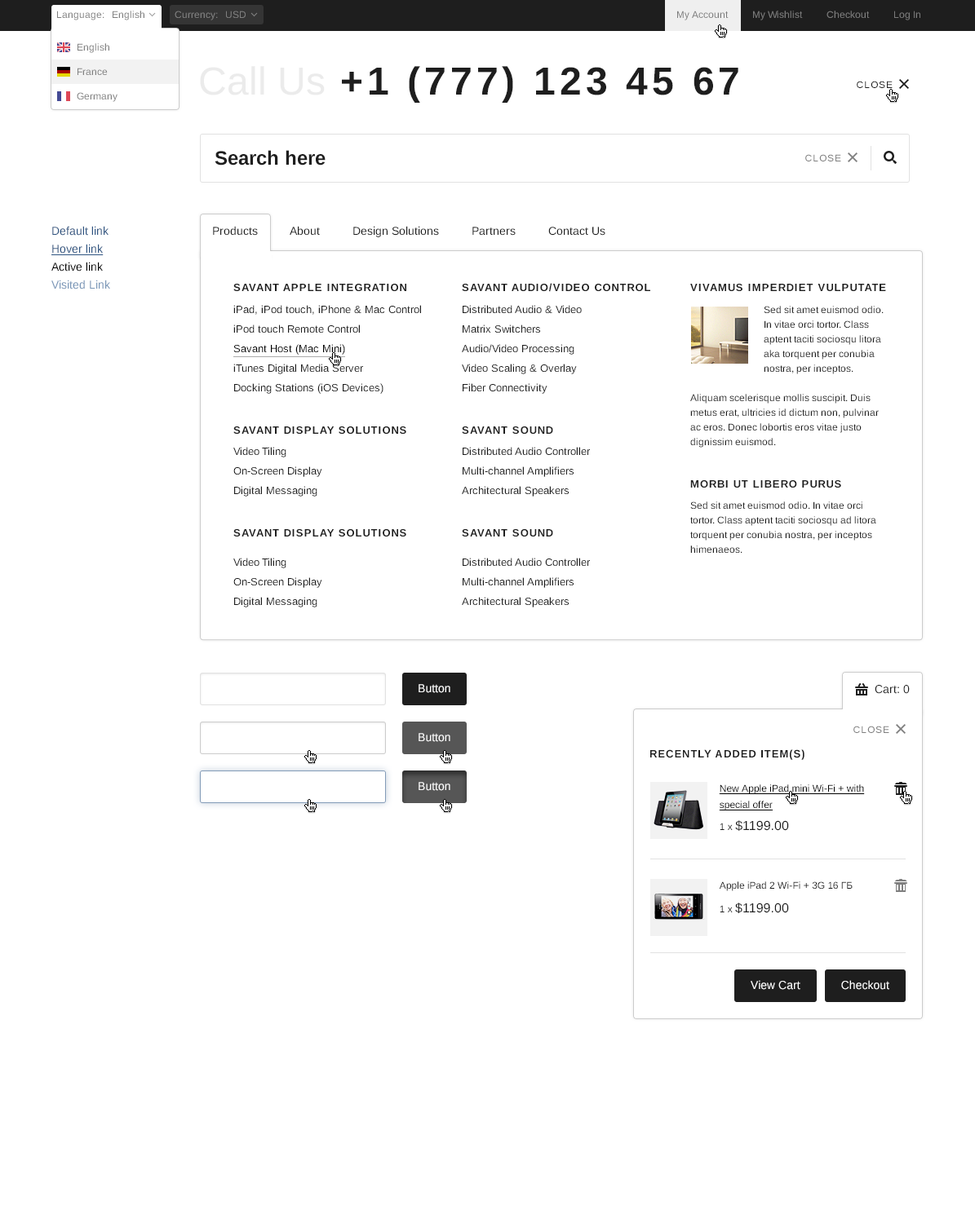
<style>
.page{position:relative;width:975px;height:1223px;background:#ffffff}
.page>*{position:absolute;margin:0}
.t1{font:9.8px "Arimo";color:#7f7f7f}
.t2{font:9.8px/24.5px "Arimo";color:#7f7f7f}
.t3{font:39.2px "Arimo-Bold";letter-spacing:0.1em;color:#1e1e1e}
.t4{font:39.2px "Arimo";color:#ebebeb}
.t5{font:9.8px "Arimo";letter-spacing:0.075em;color:#1e1e1e;text-transform:uppercase}
.t6{font:19.6px "Arimo-Bold";color:#1e1e1e}
.t7{font:9.8px "Arimo";letter-spacing:0.075em;color:#7f7f7f;text-transform:uppercase}
.t8{font:11.4px/17.9px "Arimo";color:#2e5481}
.t9{font:11.4px/17.9px "Arimo";color:#2e5481;text-decoration:underline}
.t10{font:11.4px/17.9px "Arimo";color:#000000}
.t11{font:11.4px/17.9px "Arimo";color:#7996b7}
.t12{font:11.4px "Arimo";color:#1e1e1e}
.t13{font:10.6px/19.6px "Arimo";color:#1e1e1e}
.t14{font:10.6px "Arimo-Bold";letter-spacing:0.075em;color:#1e1e1e;text-transform:uppercase}
.t15{font:10.6px/9.8px "Arimo";color:#1e1e1e}
.t16{font:10.6px/19.6px "Arimo";color:#000000}
.t17{font:9.8px/14.7px "Arimo";color:#1e1e1e}
.t18{font:9.8px/9.8px "Arimo";color:#1e1e1e}
.t19{font:10.6px/19.6px "Arimo-Bold";letter-spacing:0.075em;color:#1e1e1e;text-transform:uppercase}
.t20{font:11.4px "Arimo";color:#ffffff}
.t21{font:9.8px/16.3px "Arimo";color:#000000;text-decoration:underline}
.t22{font:13.1px "Arimo";color:#1e1e1e}
.t23{font:9.8px "Arimo";color:#1e1e1e}
</style>
<div class="page">
<p class="t1" style="left:57px;top:11px;width:87px;height:9px">Language:   English</p>
<p class="t1" style="left:175px;top:11px;width:71px;height:9px">Currency:   USD</p>
<p class="t2" style="left:77px;top:43px;width:40px;height:59px">English<br>France<br>Germany</p>
<p class="t3" style="left:200px;top:66px;width:538px;height:37px"><span class="t4">Call Us</span> +1 (777) 123 45 67</p>
<p class="t5" style="left:856px;top:81px;width:36px;height:7px">Close</p>
<p class="t6" style="left:215px;top:150px;width:110px;height:16px">Search here</p>
<p class="t7" style="left:805px;top:154px;width:36px;height:7px">Close</p>
<p class="t8" style="left:51px;top:226px;width:59px;height:64px">Default link<br><span class="t9">Hover link<br></span><span class="t10">Active link<br></span><span class="t11">Visited Link</span></p>
<p class="t12" style="left:213px;top:226px;width:392px;height:11px">Products          About          Design Solutions          Partners          Contact Us</p>
<p class="t13" style="left:233px;top:284px;width:188px;height:110px"><span class="t14">Savant Apple Integration<br><br></span><span class="t15">iPad, iPod touch, iPhone &amp; Mac Control <br></span>iPod touch Remote Control <br><span class="t16">Savant Host (Mac Mini) <br></span>iTunes Digital Media Server <br>Docking Stations (iOS Devices)</p>
<p class="t13" style="left:462px;top:283px;width:188px;height:111px"><span class="t14">Savant Audio/Video Control<br><br></span><span class="t15">Distributed Audio &amp; Video <br></span>Matrix Switchers <br>Audio/Video Processing <br>Video Scaling &amp; Overlay <br>Fiber Connectivity</p>
<p class="t17" style="left:690px;top:284px;width:196px;height:164px"><span class="t14">Vivamus imperdiet vulputate<br><br></span><span class="t18">Sed sit amet euismod odio. In vitae orci tortor. </span>Class aptent taciti sociosqu litora aka torquent per conubia nostra, per inceptos. <br><br>Aliquam scelerisque mollis suscipit. Duis metus erat, ultricies id dictum non, pulvinar ac eros. Donec lobortis eros vitae justo dignissim euismod.</p>
<p class="t13" style="left:233px;top:427px;width:173px;height:70px"><span class="t14">Savant Display Solutions<br><br></span><span class="t15">Video Tiling<br></span>On-Screen Display<br>Digital Messaging</p>
<p class="t13" style="left:462px;top:427px;width:128px;height:70px"><span class="t14">Savant Sound<br><br></span><span class="t15">Distributed Audio Controller <br></span>Multi-channel Amplifiers <br>Architectural Speakers</p>
<p class="t17" style="left:690px;top:480px;width:186px;height:73px"><span class="t14">Morbi ut libero purus<br><br></span><span class="t18">Sed sit amet euismod odio. In vitae orci tortor. </span>Class aptent taciti sociosqu ad litora torquent per conubia nostra, per inceptos himenaeos.</p>
<p class="t13" style="left:233px;top:529px;width:173px;height:79px"><span class="t19">Savant Display Solutions<br><br></span><span class="t15">Video Tiling<br></span>On-Screen Display<br>Digital Messaging</p>
<p class="t13" style="left:462px;top:529px;width:128px;height:79px"><span class="t19">Savant Sound<br><br></span><span class="t15">Distributed Audio Controller <br></span>Multi-channel Amplifiers <br>Architectural Speakers</p>
<p class="t20" style="left:418px;top:684px;width:32px;height:9px">Button</p>
<p class="t12" style="left:874px;top:685px;width:35px;height:9px">Cart: 0</p>
<p class="t7" style="left:853px;top:726px;width:36px;height:7px">Close</p>
<p class="t20" style="left:418px;top:733px;width:32px;height:9px">Button</p>
<p class="t14" style="left:650px;top:750px;width:154px;height:10px">Recently added item(s)</p>
<p class="t20" style="left:418px;top:782px;width:32px;height:9px">Button</p>
<p class="t21" style="left:719px;top:785px;width:146px;height:26px">New Apple iPad mini Wi-Fi + with<br>special offer</p>
<p class="t22" style="left:719px;top:821px;width:70px;height:10px"><span class="t23">1 x </span>$1199.00</p>
<p class="t23" style="left:719px;top:882px;width:133px;height:9px">Apple iPad 2 Wi-Fi + 3G 16 ГБ</p>
<p class="t22" style="left:719px;top:903px;width:70px;height:10px"><span class="t23">1 x </span>$1199.00</p>
<p class="t20" style="left:750px;top:980px;width:50px;height:10px">View Cart</p>
<p class="t20" style="left:841px;top:980px;width:48px;height:10px">Checkout</p>
</div>
